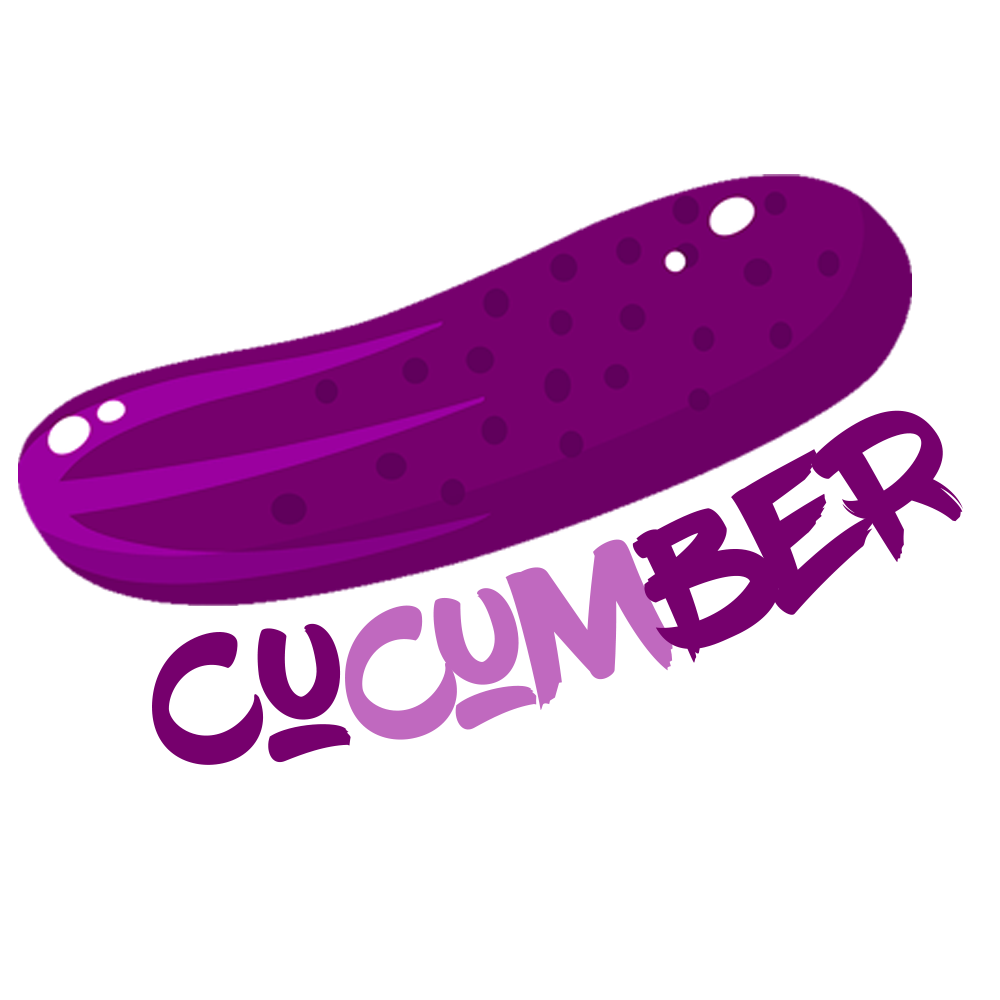
<style>
.page{position:relative;width:1000px;height:1000px;background:#ffffff}
.page>*{position:absolute;margin:0}
.t1{font:193px "BlowBrush";color:#c069bf}
.t2{font:193px "BlowBrush";color:#76006d}
</style>
<div class="page">
<p class="t1" style="left:152px;top:410px;width:811px;height:355px;rotate:-18deg"><span class="t2">Cu</span>cum<span class="t2">ber</span></p>
</div>
